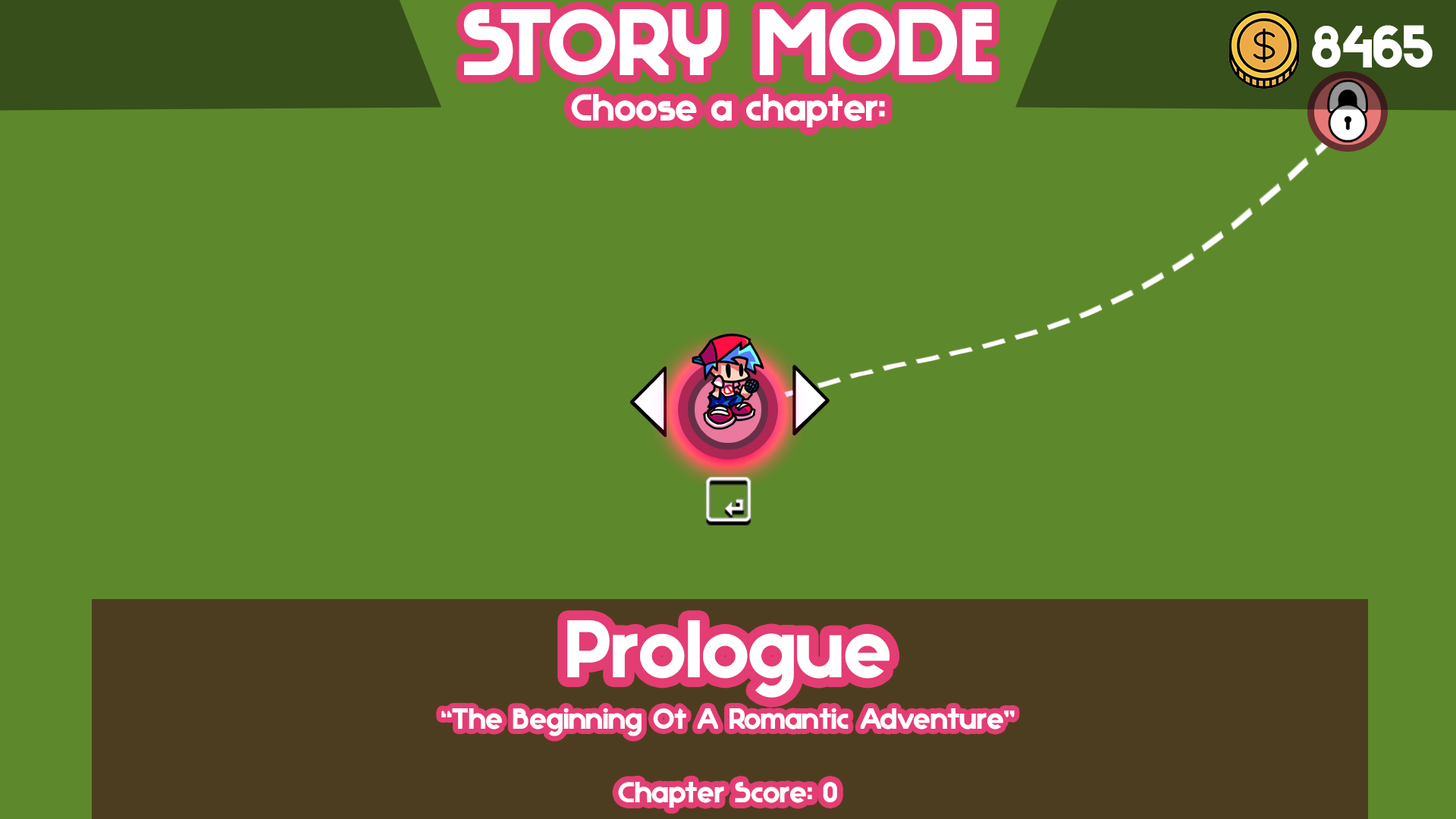
<style>
.page{position:relative;width:1456px;height:819px;background:#5e882c}
.page>*{position:absolute;margin:0}
.t1{font:37.9px "Rostov";color:#ffffff}
.t2{font:95.1px "Rostov";color:#ffffff}
.t3{font:60.5px "Rostov";color:#ffffff}
.t4{font:81.8px "Rostov";color:#ffffff}
.t5{font:29.3px "Rostov";color:#ffffff}
</style>
<div class="page">
<p class="t1" style="left:463px;top:9px;width:529px;height:118px;text-align:center"><span class="t2">STORY MODE<br></span>Choose a chapter:</p>
<p class="t3" style="left:1312px;top:25px;width:120px;height:42px">8465</p>
<p class="t4" style="left:567px;top:620px;width:323px;height:78px">Prologue</p>
<p class="t5" style="left:441px;top:708px;width:574px;height:28px">“The Beginning Of A Romantic Adventure”</p>
<p class="t5" style="left:618px;top:782px;width:219px;height:26px">Chapter Score: 0</p>
</div>
